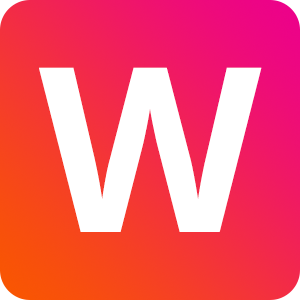
<style>
.page{position:relative;width:300px;height:300px;background:#ffffff}
.page>*{position:absolute;margin:0}
.t1{font:230px "OpenSans-Bold";color:#ffffff}
</style>
<div class="page">
<p class="t1" style="left:39px;top:67px;width:223px;height:165px">W</p>
</div>
